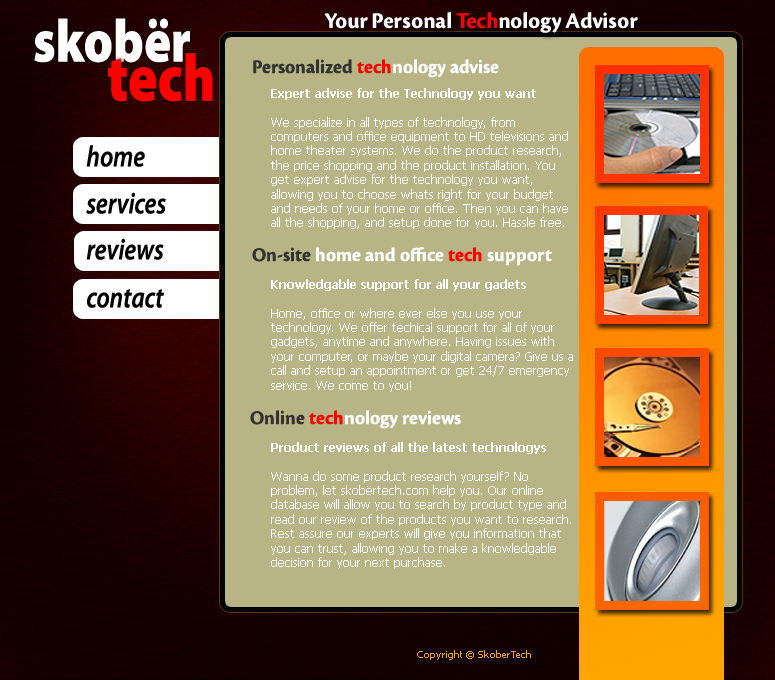
<style>
.page{position:relative;width:775px;height:680px;background:#b8b485}
.page>*{position:absolute;margin:0}
.t1{font:23px "CronosPro-BoldSubh";color:#ffffff}
.t2{font:23px "CronosPro-BoldSubh";color:#ff0000}
.t3{font:60.5px "MyriadPro-Black";color:#ffffff;scale:0.83 1}
.t4{font:66.6px "MyriadPro-Black";color:#ff0000;scale:0.83 1}
.t5{font:12px "Tahoma";color:#ffffff}
.t6{font:12px "Tahoma-Bold";color:#ffffff}
.t7{font:29.6px "MyriadPro-SemiboldIt";color:#000000;scale:0.83 1}
.t8{font:20px "CronosPro-BoldSubh";color:#ffffff}
.t9{font:20px "CronosPro-BoldSubh";color:#323232}
.t10{font:20px "CronosPro-BoldSubh";color:#ff0000}
.t11{font:10px "Tahoma";color:#ffa200}
</style>
<div class="page">
<p class="t1" style="left:324px;top:12px;width:314px;height:21px">Your Personal <span class="t2">Tech</span>nology Advisor</p>
<p class="t3" style="left:34px;top:18px;width:156px;height:45px">skobër</p>
<p class="t4" style="left:108px;top:53px;width:105px;height:49px">tech</p>
<p class="t5" style="left:271px;top:88px;width:297px;height:141px"><span class="t6">Expert advise for the Technology you want<br></span><br>We specialize in all types of technology, from computers and office equipment to HD televisions and home theater systems. We do the product research, the price shopping and the product installation. You get expert advise for the technology you want, allowing you to choose whats right for your budget and needs of your home or office. Then you can have all the shopping, and setup done for you. Hassle free.</p>
<p class="t7" style="left:86px;top:145px;width:59px;height:22px">home</p>
<p class="t7" style="left:86px;top:192px;width:80px;height:22px">services</p>
<p class="t7" style="left:86px;top:238px;width:78px;height:22px">reviews</p>
<p class="t8" style="left:252px;top:247px;width:300px;height:19px"><span class="t9">On-site </span>home and office <span class="t10">tech</span> support</p>
<p class="t5" style="left:271px;top:279px;width:302px;height:113px"><span class="t6">Knowledgable support for all your gadets<br><br></span>Home, office or where ever else you use your technology. We offer techical support for all of your gadgets, anytime and anywhere. Having issues with your computer, or maybe your digital camera? Give us a call and setup an appointment or get 24/7 emergency service. We come to you!</p>
<p class="t7" style="left:87px;top:289px;width:77px;height:19px">contact</p>
<p class="t5" style="left:271px;top:442px;width:300px;height:127px"><span class="t6">Product reviews of all the latest technologys<br><br></span>Wanna do some product research yourself? No problem, let skobërtech.com help you. Our online database will allow you to search by product type and read our review of the products you want to research. Rest assure our experts will give you information that you can trust, allowing you to make a knowledgable decision for your next purchase.</p>
<p class="t11" style="left:417px;top:650px;width:114px;height:10px">Copyright © SkoberTech</p>
</div>
